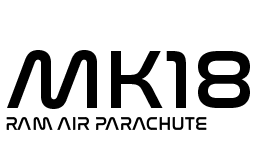
<style>
.page{position:relative;width:256px;height:160px;background:#ffffff}
.page>*{position:absolute;margin:0}
.t1{font:18px "Nasalization-Regular";color:#000000}
.t2{font:85px "Nasalization-Regular";color:#000000}
</style>
<div class="page">
<p class="t1" style="left:6px;top:50px;width:244px;height:80px"><span class="t2">MK18<br></span>RAM AIR PARACHUTE</p>
</div>
